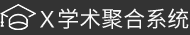
<style>
.page{position:relative;width:190px;height:35px;background:#333333}
.page>*{position:absolute;margin:0}
.t1{font:22px "FZHTJW--GB1-0";color:#fafafa}
.t2{font:22px "SourceHanSansCN-Regular";color:#fafafa}
</style>
<div class="page">
<p class="t1" style="left:40px;top:11px;width:15px;height:17px">X</p>
<p class="t2" style="left:58px;top:8px;width:131px;height:21px">学术聚合系统</p>
</div>
